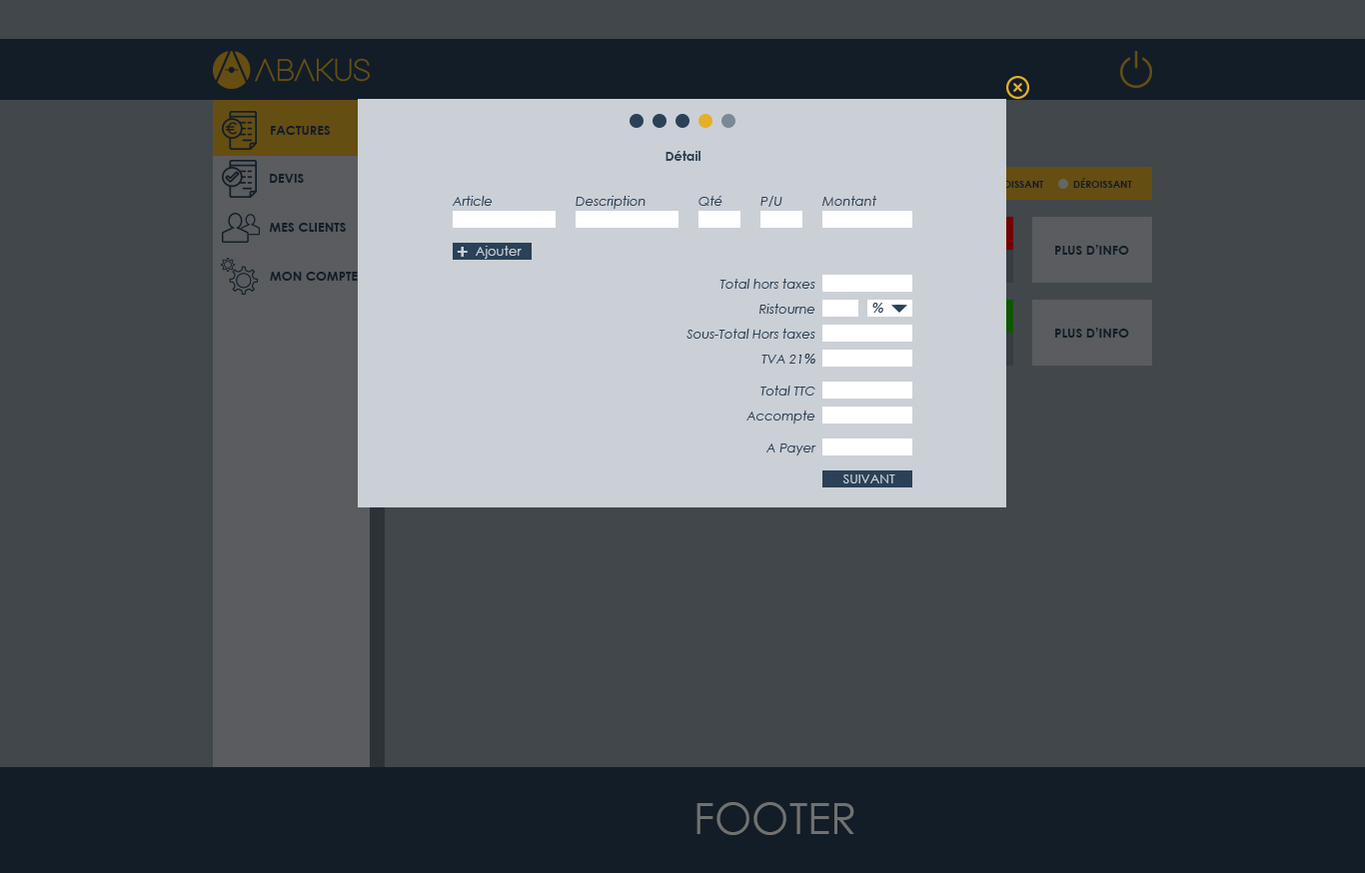
<style>
.page{position:relative;width:1365px;height:873px;background:#42474c}
.page>*{position:absolute;margin:0}
.t1{font:13px "CenturyGothic-Bold";color:#2b4158}
.t2{font:13px "CenturyGothic-Italic";color:#2a4158}
.t3{font:13px "CenturyGothic";color:#cbd0d6}
.t4{font:19.7px "CenturyGothic-Bold";color:#cbd0d6;text-transform:uppercase}
.t5{font:13px "Arial-ItalicMT";color:#2a4158}
</style>
<div class="page">
<p class="t1" style="left:666px;top:151px;width:35px;height:10px">Détail</p>
<p class="t2" style="left:452px;top:196px;width:41px;height:10px">Article</p>
<p class="t2" style="left:576px;top:196px;width:70px;height:13px">Description</p>
<p class="t2" style="left:699px;top:196px;width:24px;height:10px">Qté</p>
<p class="t2" style="left:761px;top:196px;width:22px;height:11px">P/U</p>
<p class="t2" style="left:822px;top:196px;width:55px;height:10px">Montant</p>
<p class="t3" style="left:476px;top:246px;width:46px;height:13px">Ajouter</p>
<p class="t4" style="left:457px;top:247px;width:11px;height:10px">+</p>
<p class="t2" style="left:720px;top:279px;width:96px;height:10px">Total hors taxes</p>
<p class="t2" style="left:760px;top:304px;width:56px;height:10px">Ristourne</p>
<p class="t5" style="left:872px;top:303px;width:11px;height:10px">%</p>
<p class="t2" style="left:687px;top:329px;width:129px;height:10px">Sous-Total Hors taxes</p>
<p class="t2" style="left:762px;top:354px;width:54px;height:10px">TVA 21<span class="t5">%</span></p>
<p class="t2" style="left:761px;top:386px;width:55px;height:10px">Total TTC</p>
<p class="t2" style="left:747px;top:411px;width:69px;height:13px">Accompte</p>
<p class="t2" style="left:766px;top:444px;width:51px;height:12px">A Payer</p>
<p class="t3" style="left:842px;top:475px;width:53px;height:9px">SUIVANT</p>
</div>
